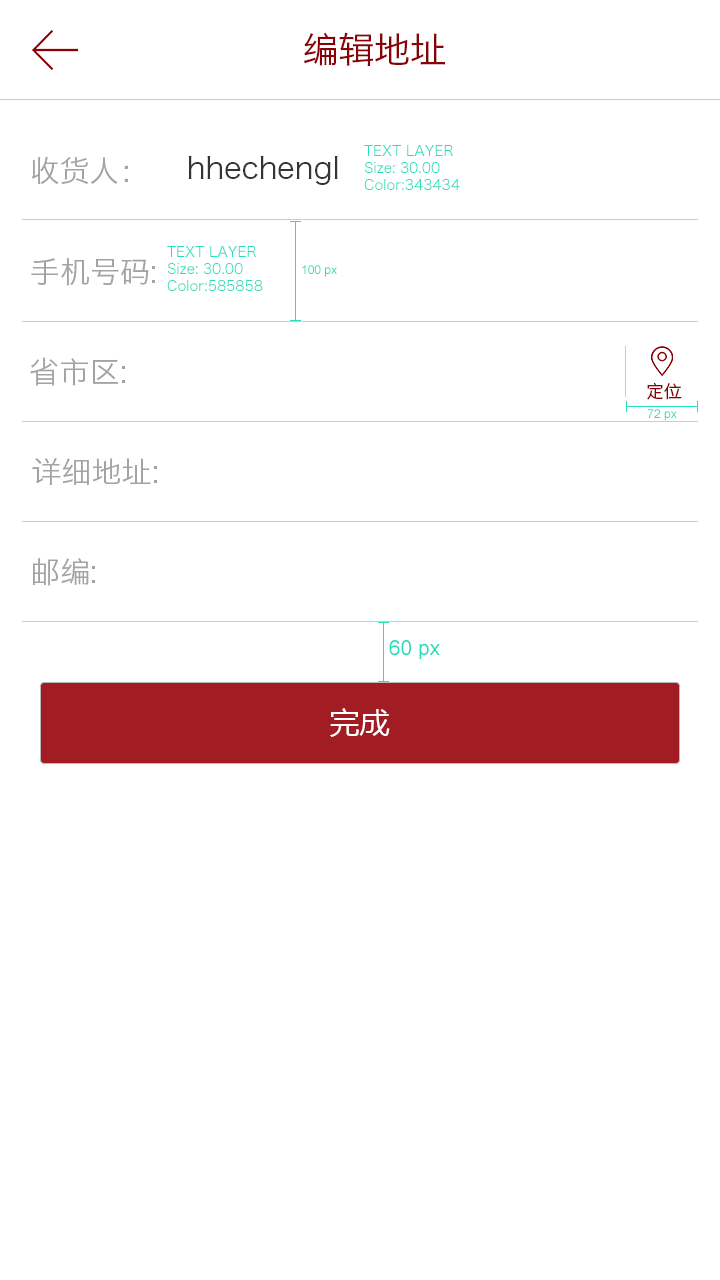
<style>
.page{position:relative;width:720px;height:1280px;background:#ffffff}
.page>*{position:absolute;margin:0}
.t1{font:36px "HiraginoSansGB-W3";color:#8a0105}
.t2{font:14px "HiraginoSansGB-W3";color:#28ddb9}
.t3{font:30px "HiraginoSansGB-W3";color:#a3a3a3}
.t4{font:30px "HiraginoSansGB-W3";color:#343434}
.t5{font:12px "ArialMT";color:#28ddb9}
.t6{font:18px "HiraginoSansGB-W3";color:#8a0105}
.t7{font:20.8px "ArialMT";color:#28ddb9}
.t8{font:30px "MicrosoftYaHei";color:#ffffff}
</style>
<div class="page">
<p class="t1" style="left:304px;top:32px;width:142px;height:34px">编辑地址</p>
<p class="t2" style="left:364px;top:145px;width:96px;height:45px">TEXT LAYER<br>Size: 30.00<br>Color:343434</p>
<p class="t3" style="left:32px;top:156px;width:96px;height:29px">收货人：</p>
<p class="t4" style="left:188px;top:156px;width:150px;height:29px">hhechengl</p>
<p class="t2" style="left:167px;top:246px;width:96px;height:45px">TEXT LAYER<br>Size: 30.00<br>Color:585858</p>
<p class="t3" style="left:31px;top:258px;width:124px;height:28px">手机号码:</p>
<p class="t5" style="left:302px;top:265px;width:35px;height:12px">100 px</p>
<p class="t3" style="left:30px;top:357px;width:95px;height:29px">省市区:</p>
<p class="t6" style="left:647px;top:382px;width:35px;height:18px">定位</p>
<p class="t5" style="left:647px;top:409px;width:30px;height:12px">72 px</p>
<p class="t3" style="left:32px;top:458px;width:125px;height:27px">详细地址:</p>
<p class="t3" style="left:32px;top:558px;width:63px;height:28px">邮编:</p>
<p class="t7" style="left:389px;top:640px;width:51px;height:20px">60 px</p>
<p class="t8" style="left:330px;top:708px;width:60px;height:29px">完成</p>
</div>
